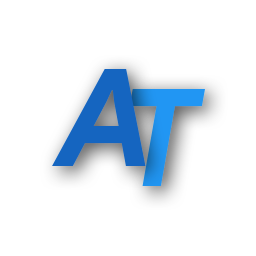
<style>
.page{position:relative;width:256px;height:256px;background:#ffffff}
.page>*{position:absolute;margin:0}
.t1{font:135.3px "ProductSans-BoldItalic";letter-spacing:-0.22em;color:#1565c0}
.t2{font:135.3px "ProductSans-BoldItalic";letter-spacing:-0.22em;color:#2196f3}
</style>
<div class="page">
<p class="t1" style="left:52px;top:69px;width:94px;height:97px">A</p>
<p class="t2" style="left:129px;top:89px;width:76px;height:97px">T</p>
</div>
